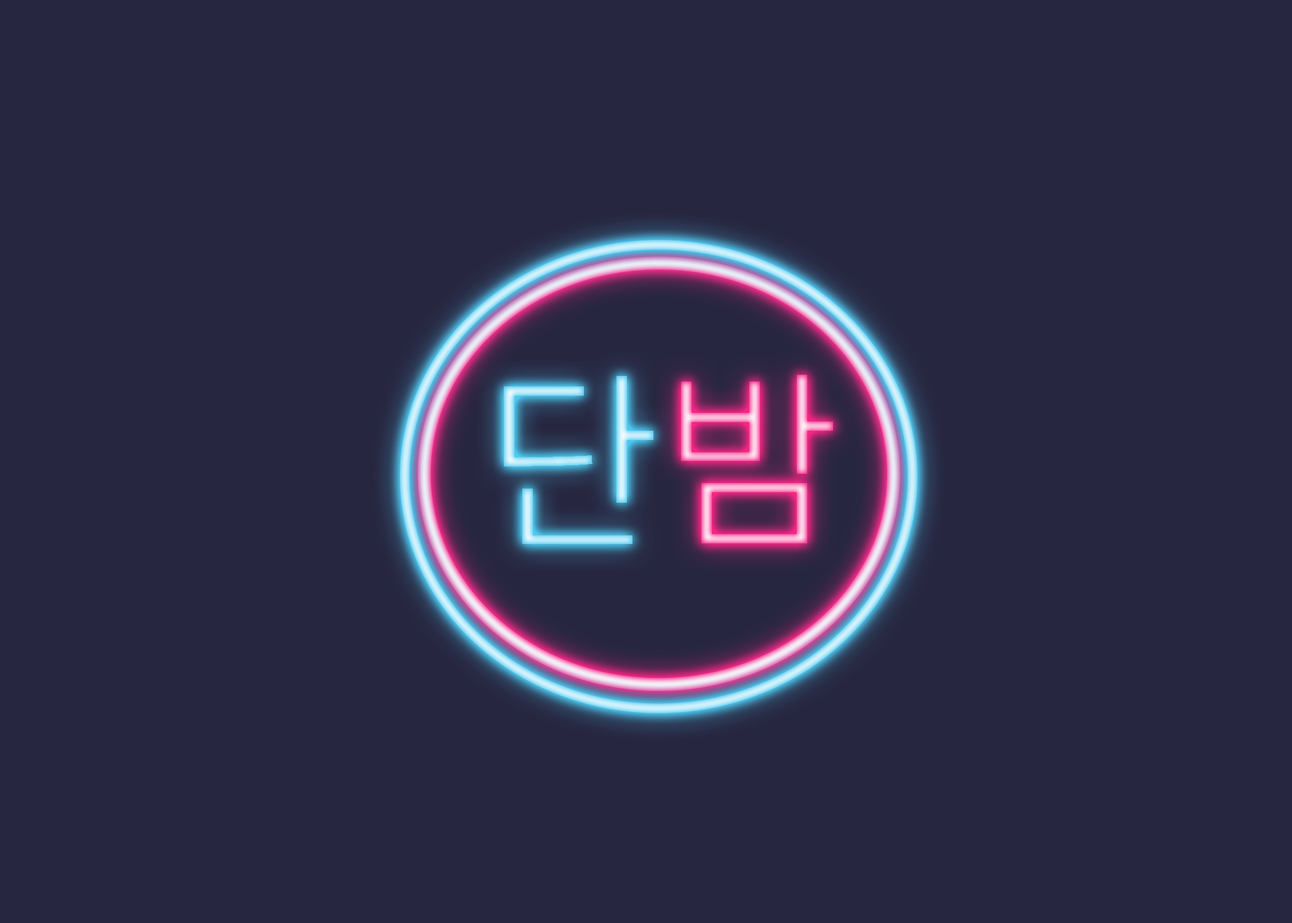
<style>
.page{position:relative;width:1292px;height:923px;background:#272640}
.page>*{position:absolute;margin:0}
.t1{font:184.6px "MalgunGothic-Semilight"}
</style>
<div class="page">
<p class="t1" style="left:504px;top:376px;width:149px;height:168px">단</p>
<p class="t1" style="left:681px;top:375px;width:152px;height:168px">밤</p>
</div>
